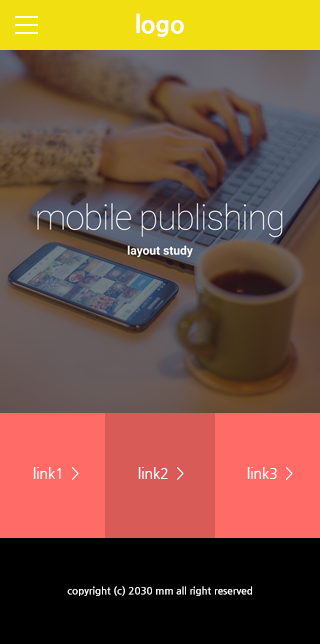
<style>
.page{position:relative;width:320px;height:644px}
.page>*{position:absolute;margin:0}
.t1{font:24px "NanumGothicExtraBold";color:#ffffff}
.t2{font:14px "NanumGothic";color:#ffffff}
.t3{font:10px "NanumGothicBold";color:#ffffff}
</style>
<div class="page">
<p class="t1" style="left:136px;top:13px;width:48px;height:24px">logo</p>
<p class="t2" style="left:33px;top:467px;width:46px;height:13px">link1  &gt;</p>
<p class="t2" style="left:138px;top:467px;width:46px;height:13px">link2  &gt;</p>
<p class="t2" style="left:247px;top:467px;width:46px;height:13px">link3  &gt;</p>
<p class="t3" style="left:67px;top:586px;width:185px;height:10px">copyright (c) 2030 mm all right reserved</p>
</div>
